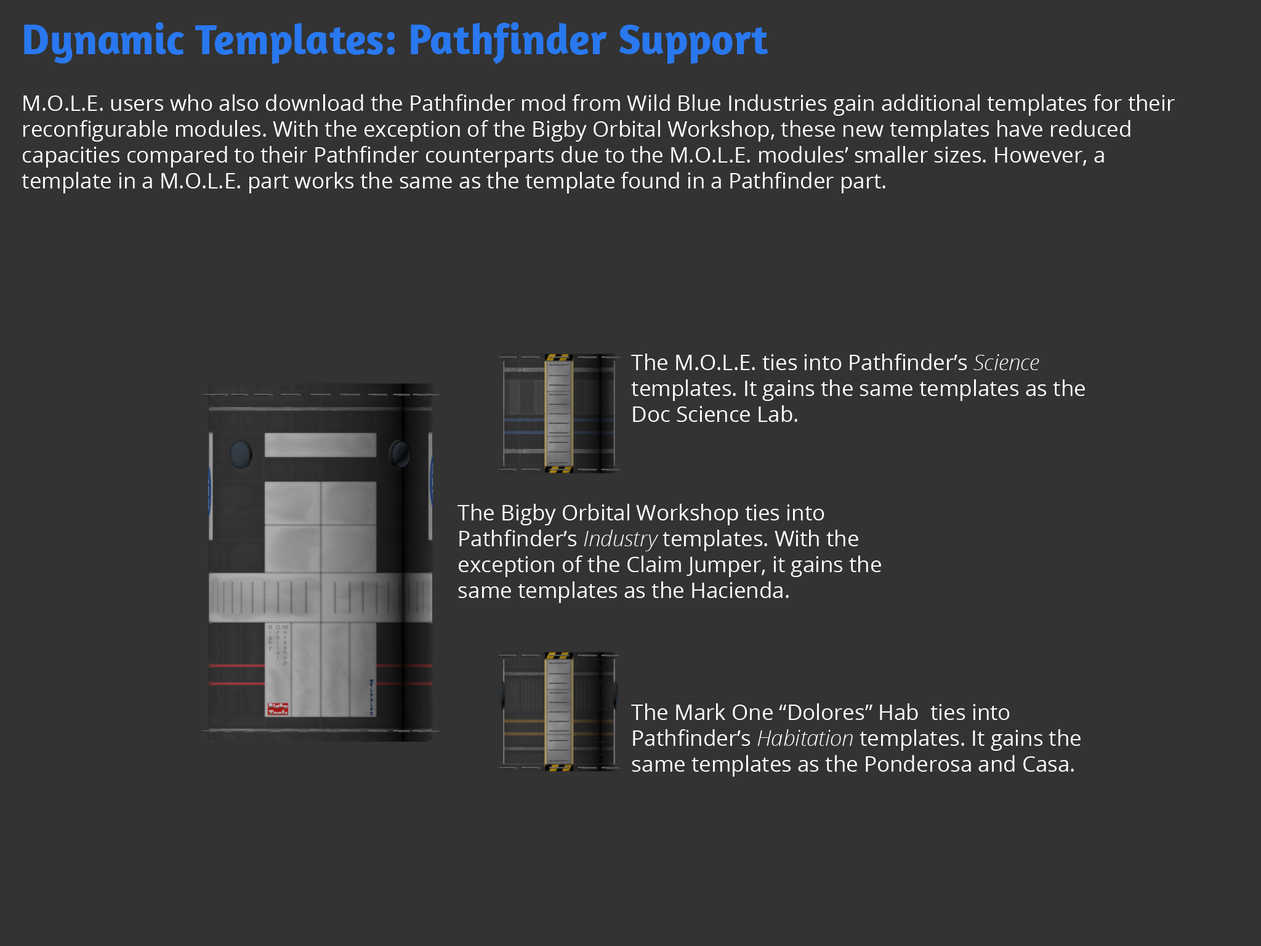
<style>
.page{position:relative;width:1261px;height:946px;background:#333333}
.page>*{position:absolute;margin:0}
.t1{font:43.1px "Amaranth-Bold";color:#2978ef}
.t2{font:21.5px "OpenSans";color:#ffffff}
.t3{font:21.5px "OpenSansLight-Italic";color:#ffffff}
</style>
<div class="page">
<p class="t1" style="left:24px;top:22px;width:744px;height:42px">Dynamic Templates: Pathfinder Support</p>
<p class="t2" style="left:22px;top:94px;width:1153px;height:99px">M.O.L.E. users who also download the Pathfinder mod from Wild Blue Industries gain additional templates for their reconfigurable modules. With the exception of the Bigby Orbital Workshop, these new templates have reduced capacities compared to their Pathfinder counterparts due to the M.O.L.E. modules’ smaller sizes. However, a template in a M.O.L.E. part works the same as the template found in a Pathfinder part.</p>
<p class="t2" style="left:631px;top:353px;width:454px;height:69px">The M.O.L.E. ties into Pathfinder’s <span class="t3">Science </span>templates. It gains the same templates as the Doc Science Lab.</p>
<p class="t2" style="left:457px;top:504px;width:424px;height:99px">The Bigby Orbital Workshop ties into Pathfinder’s <span class="t3">Industry </span>templates. With the exception of the Claim Jumper, it gains the same templates as the Hacienda.</p>
<p class="t2" style="left:631px;top:703px;width:450px;height:73px">The Mark One “Dolores” Hab  ties into Pathfinder’s <span class="t3">Habitation </span>templates. It gains the same templates as the Ponderosa and Casa.</p>
</div>
